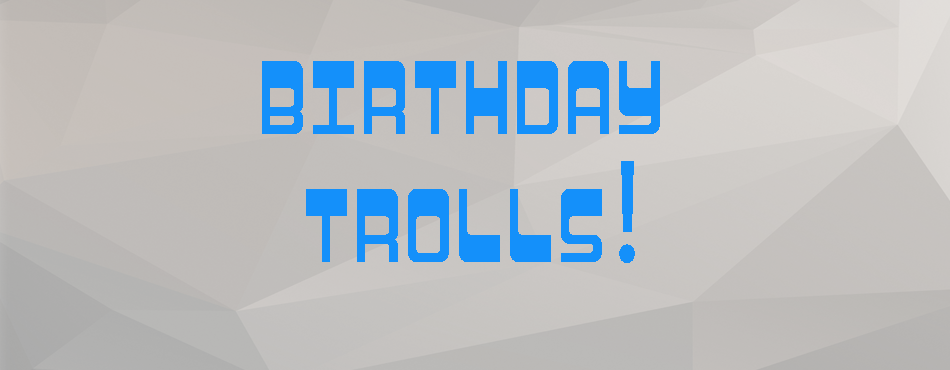
<style>
.page{position:relative;width:950px;height:370px}
.page>*{position:absolute;margin:0}
.t1{font:72.8px/127.8px "Psychedelic";letter-spacing:0.04em;color:#1490fa;scale:0.89 1}
.t2{font:149.8px/127.8px "MyriadPro-Regular";letter-spacing:0.04em;color:#1490fa;scale:0.89 1}
</style>
<div class="page">
<p class="t1" style="left:262px;top:61px;width:398px;height:202px;text-align:center">BIRTHDAY<br> TROLLS<span class="t2">!</span></p>
</div>
